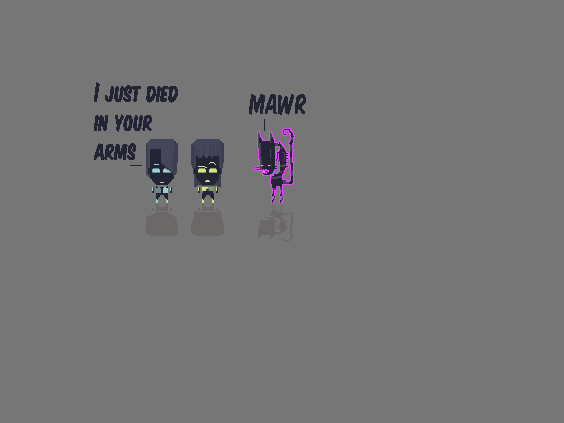
<style>
.page{position:relative;width:564px;height:423px;background:#767676}
.page>*{position:absolute;margin:0}
.t1{font:26px/29px "KomikaTitle-Kaps";color:#232534}
.t2{font:26px "KomikaTitle-Kaps";color:#232534}
</style>
<div class="page">
<p class="t1" style="left:94px;top:82px;width:84px;height:78px">I just died<br>in your<br>arms</p>
<p class="t2" style="left:249px;top:94px;width:57px;height:21px">MAWR</p>
</div>
